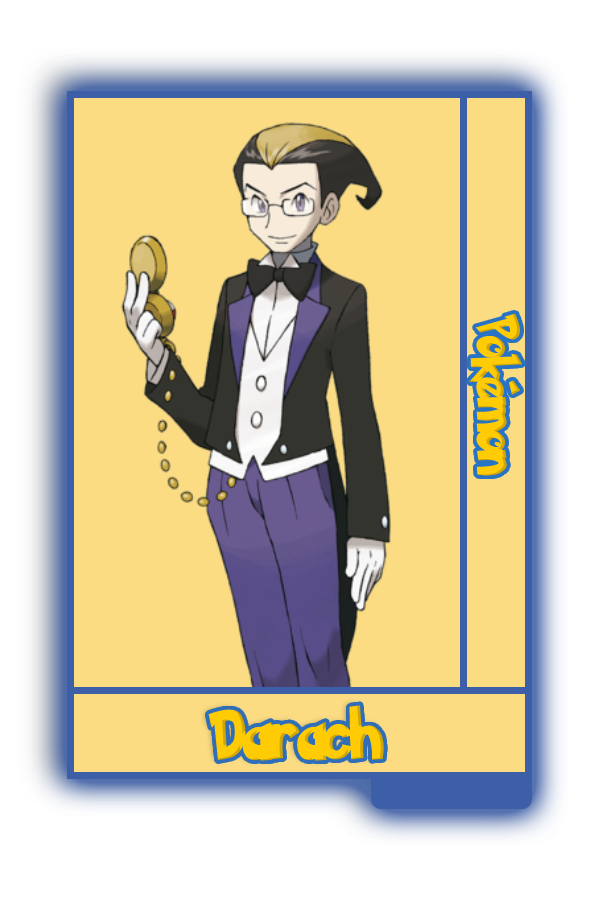
<style>
.page{position:relative;width:600px;height:900px;background:#fbdc83}
.page>*{position:absolute;margin:0}
.t1{font:48.8px "PokemonSolidNormal";color:#ffcb05;scale:0.8 1}
.t2{font:56.6px "PokemonSolidNormal";color:#ffcb05;scale:0.92 1}
</style>
<div class="page">
<p class="t1" style="left:469px;top:313px;width:54px;height:163px;rotate:90deg">Pokémon</p>
<p class="t2" style="left:208px;top:705px;width:176px;height:56px">Darach</p>
</div>
